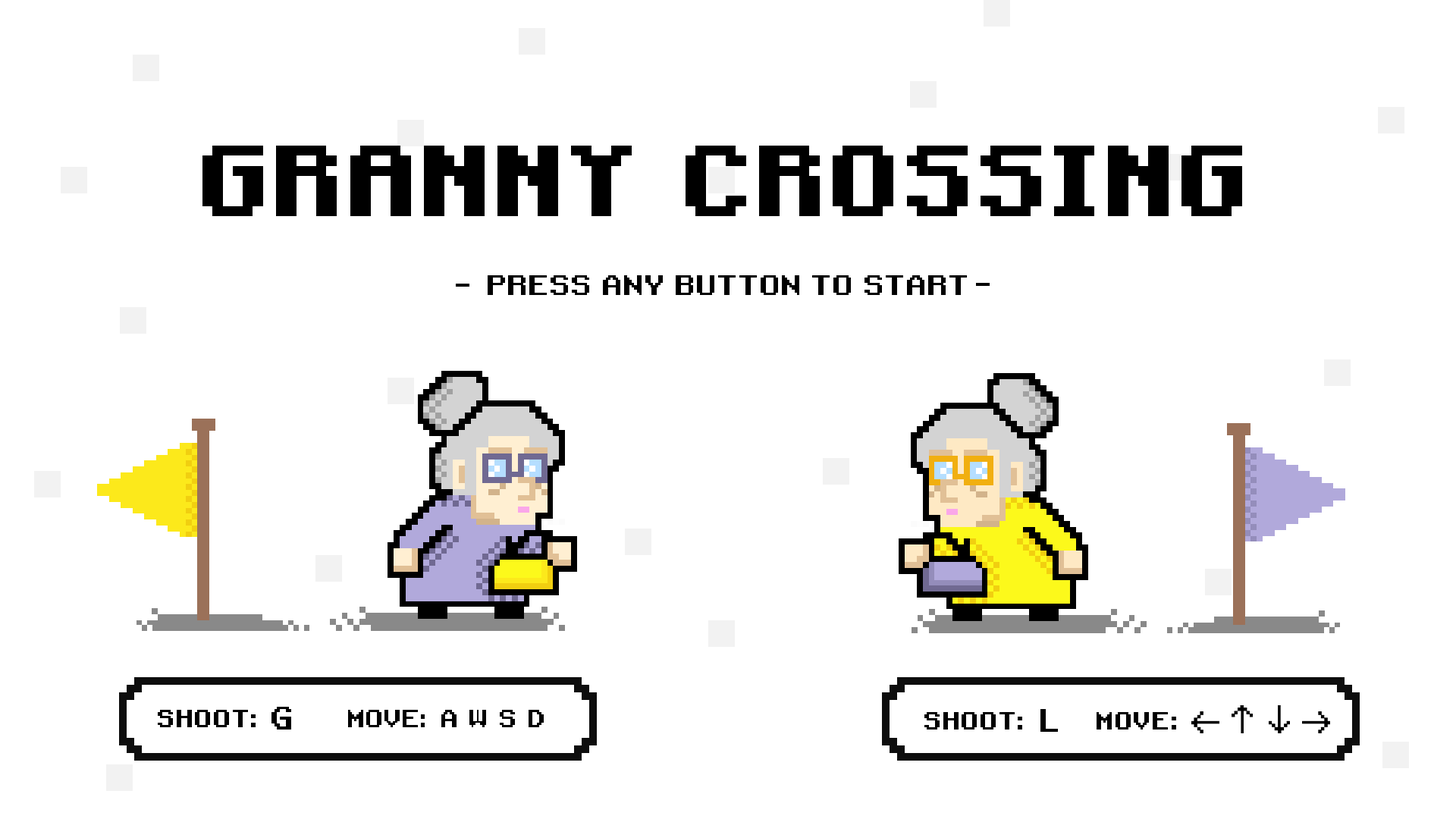
<style>
.page{position:relative;width:1456px;height:819px;background:#ffffff}
.page>*{position:absolute;margin:0}
.t1{font:80.5px "Mojang-Bold";letter-spacing:0.01em;color:#000000}
.t2{font:27.3px "RetroGaming";color:#000000}
.t3{font:24.2px "RetroGaming";color:#000000}
.t4{font:31.6px "RetroGaming";color:#000000}
.t5{font:23.5px "RetroGaming";color:#000000}
</style>
<div class="page">
<p class="t1" style="left:202px;top:146px;width:1040px;height:70px">GRANNY   CROSSING</p>
<p class="t2" style="left:488px;top:275px;width:479px;height:20px">PRESS ANY BUTTON TO START</p>
<p class="t3" style="left:158px;top:710px;width:98px;height:17px">:SHOOT</p>
<p class="t4" style="left:271px;top:707px;width:20px;height:23px">G</p>
<p class="t5" style="left:348px;top:710px;width:77px;height:17px">:MOVE</p>
<p class="t5" style="left:441px;top:710px;width:16px;height:17px">A</p>
<p class="t5" style="left:469px;top:710px;width:17px;height:17px">W</p>
<p class="t5" style="left:500px;top:710px;width:15px;height:17px">S</p>
<p class="t5" style="left:529px;top:710px;width:15px;height:17px">D</p>
<p class="t3" style="left:924px;top:712px;width:98px;height:18px">:SHOOT</p>
<p class="t4" style="left:1040px;top:709px;width:18px;height:23px">L</p>
<p class="t3" style="left:1097px;top:712px;width:79px;height:18px">:MOVE</p>
</div>
